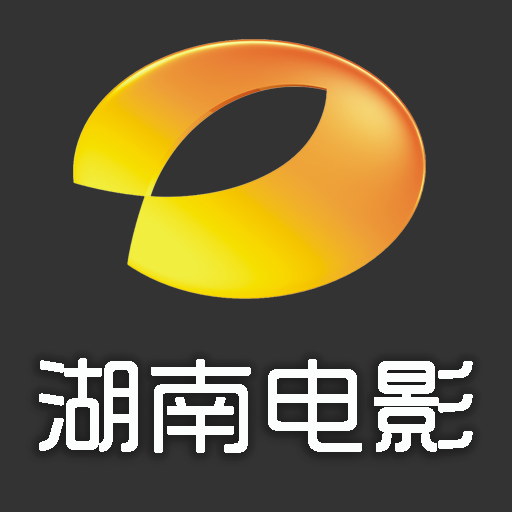
<style>
.page{position:relative;width:512px;height:512px;background:#333333}
.page>*{position:absolute;margin:0}
.t1{font:106.7px "SJshishang-Regular";letter-spacing:0.02em;color:#fcfdfd;font-weight:bold}
</style>
<div class="page">
<p class="t1" style="left:39px;top:358px;width:434px;height:95px">湖南电影</p>
</div>
